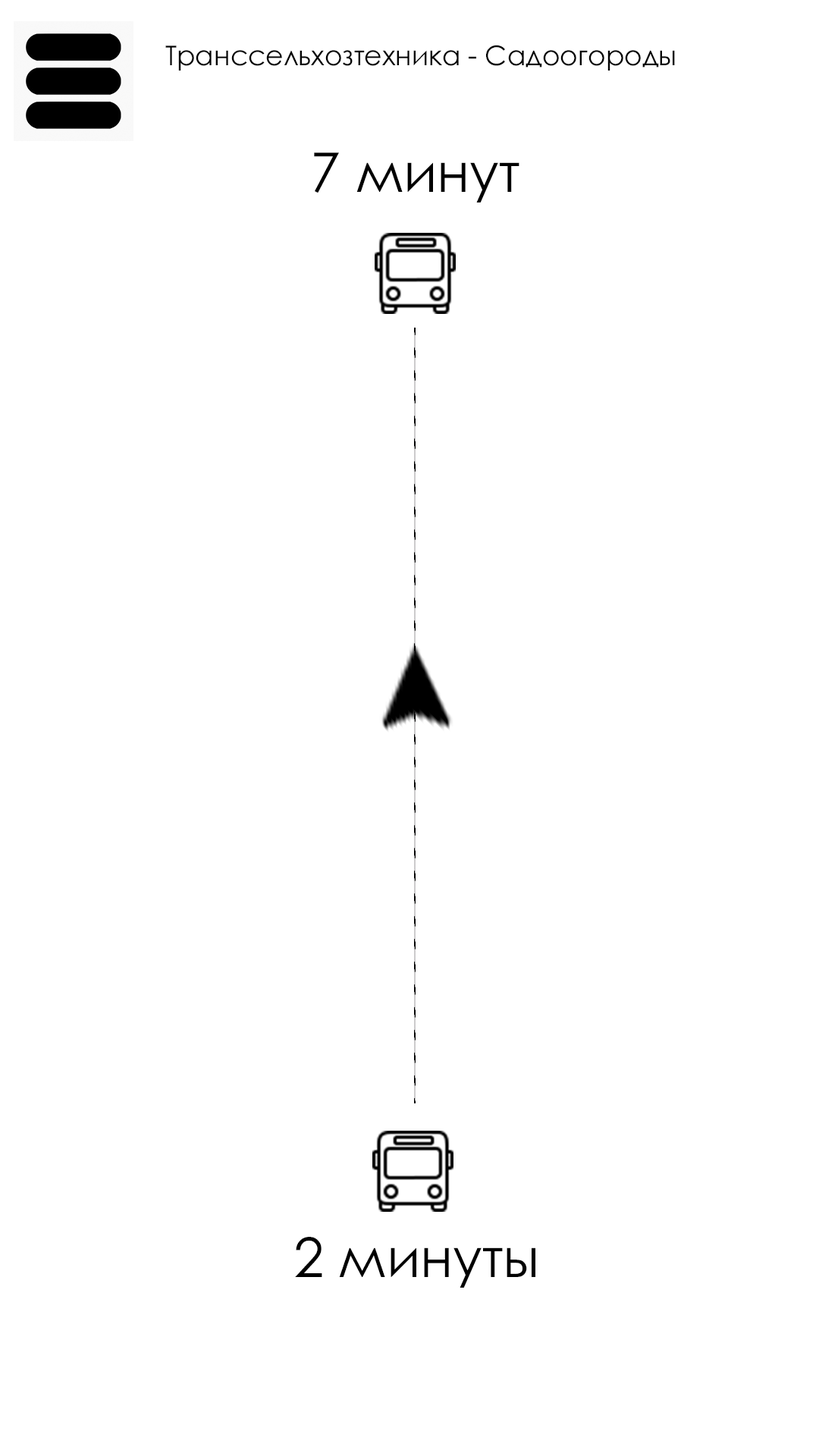
<style>
.page{position:relative;width:819px;height:1456px;background:#ffffff}
.page>*{position:absolute;margin:0}
.t1{font:27.3px "CenturyGothic";color:#000000}
.t2{font:54.6px "CenturyGothic";color:#000000}
</style>
<div class="page">
<p class="t1" style="left:165px;top:45px;width:510px;height:26px">Транссельхозтехника - Садоогороды</p>
<p class="t2" style="left:314px;top:152px;width:205px;height:50px">7 минут</p>
<p class="t2" style="left:295px;top:1237px;width:240px;height:51px">2 минуты</p>
</div>
